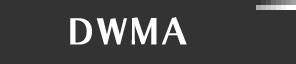
<style>
.page{position:relative;width:296px;height:64px;background:#333333}
.page>*{position:absolute;margin:0}
.t1{font:35px "ChiaroStd-B";letter-spacing:0.1em;color:#ffffff;font-weight:bold;scale:0.9 1}
</style>
<div class="page">
<p class="t1" style="left:70px;top:17px;width:117px;height:28px">DWMA</p>
</div>
